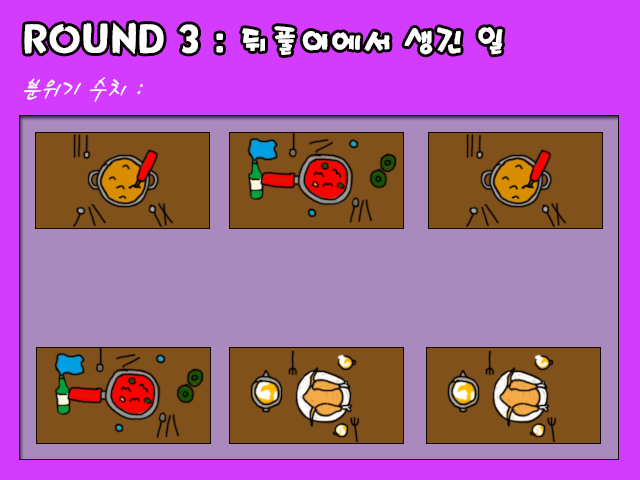
<style>
.page{position:relative;width:640px;height:480px;background:#aa89bd}
.page>*{position:absolute;margin:0}
.t1{font:30px "Mpop";color:#ffffff}
.t2{font:36px "Mpop";color:#ffffff}
.t3{font:30px "HaanCjaB";color:#ffffff}
</style>
<div class="page">
<p class="t1" style="left:24px;top:22px;width:479px;height:33px"><span class="t2">ROUND 3 : </span>뒤풀이에서 생긴 일</p>
<p class="t3" style="left:23px;top:77px;width:120px;height:25px">분위기 수치 :</p>
</div>
